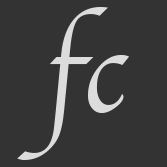
<style>
.page{position:relative;width:167px;height:167px;background:#333333}
.page>*{position:absolute;margin:0}
.t1{font:120px "Apple-Chancery";color:#dcdcdc}
</style>
<div class="page">
<p class="t1" style="left:17px;top:7px;width:113px;height:153px">fc</p>
</div>
